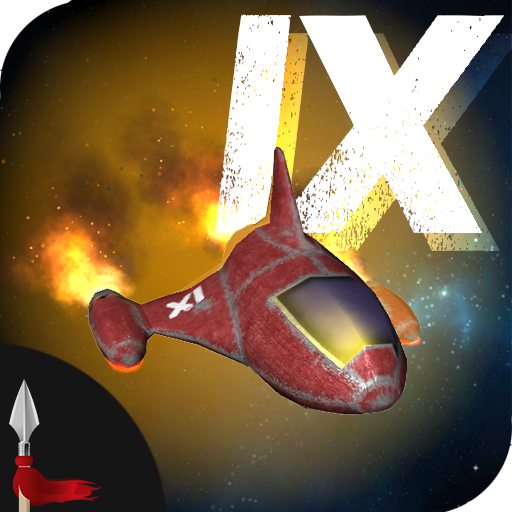
<style>
.page{position:relative;width:512px;height:512px}
.page>*{position:absolute;margin:0}
.t1{font:306px "Coalition";color:#ffffff;font-style:italic;scale:0.67 1}
</style>
<div class="page">
<p class="t1" style="left:215px;top:14px;width:289px;height:220px">IX</p>
</div>
